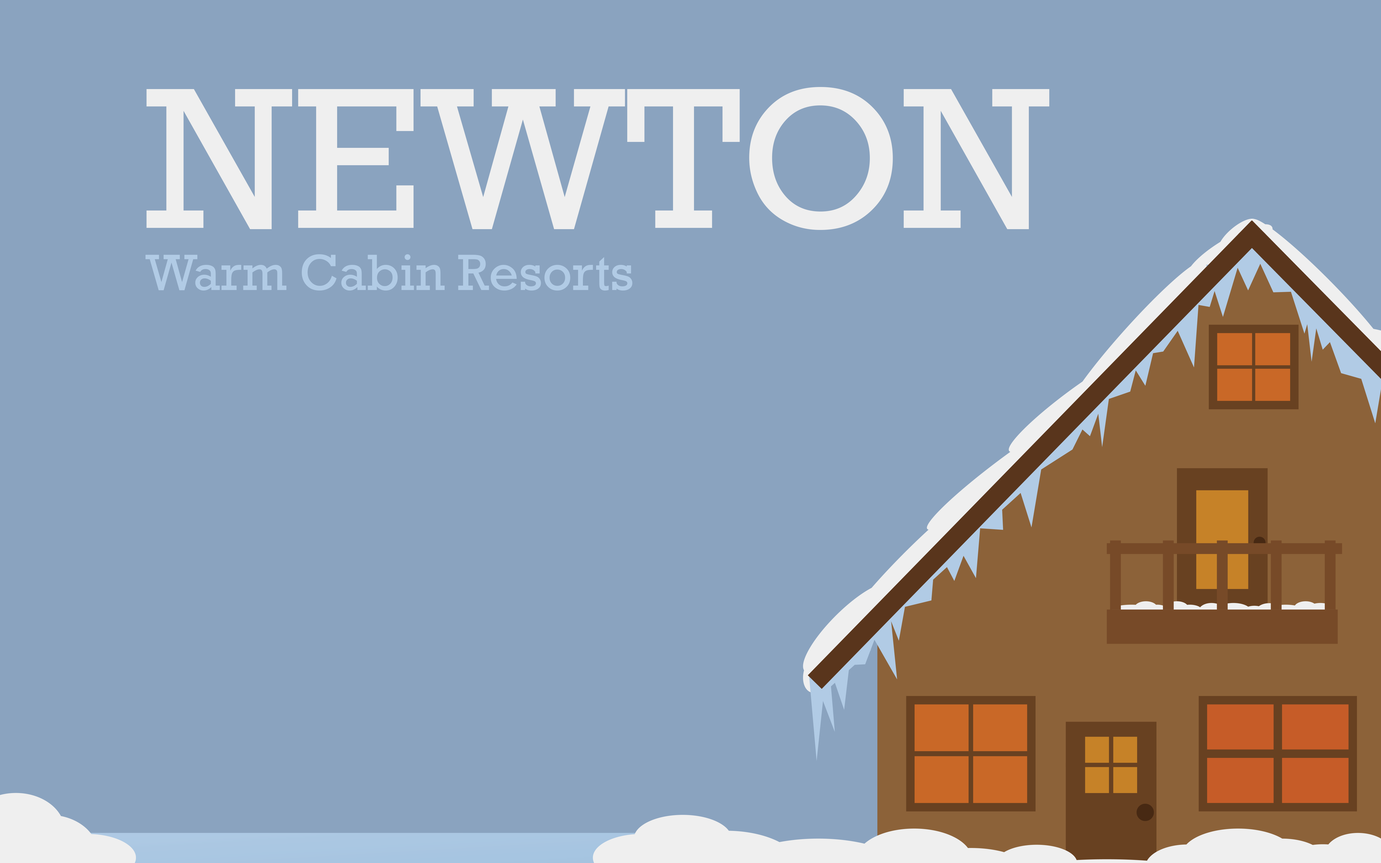
<style>
.page{position:relative;width:1381px;height:863px;background:#8aa3bf}
.page>*{position:absolute;margin:0}
.t1{font:51.8px "Rockwell";color:#b1cbe5}
.t2{font:204.5px "Rockwell";color:#efefef}
</style>
<div class="page">
<p class="t1" style="left:145px;top:87px;width:905px;height:204px"><span class="t2">NEWTON<br></span>Warm Cabin Resorts</p>
</div>
